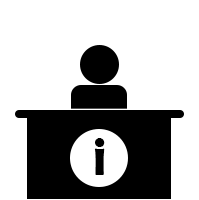
<style>
.page{position:relative;width:199px;height:200px;background:#ffffff}
.page>*{position:absolute;margin:0}
.t1{font:54.7px "BerlinSansFBDemi-Bold";color:#000000;scale:0.88 1}
</style>
<div class="page">
<p class="t1" style="left:94px;top:138px;width:11px;height:37px">i</p>
</div>
